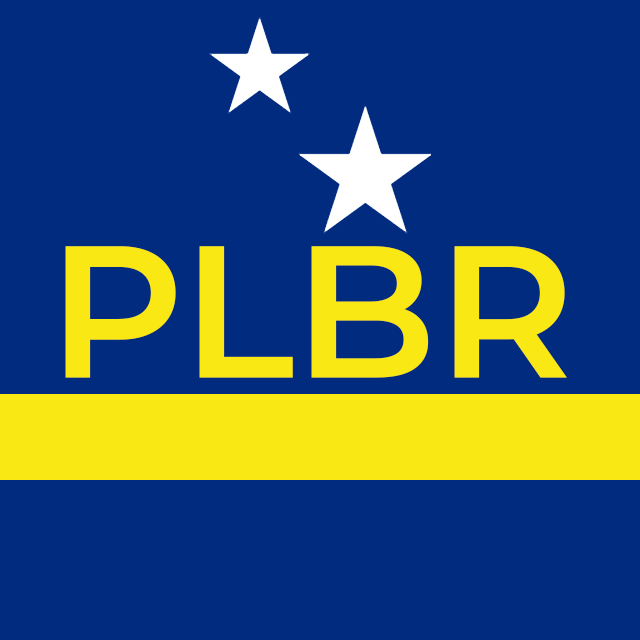
<style>
.page{position:relative;width:640px;height:640px;background:#002b7f}
.page>*{position:absolute;margin:0}
.t1{font:187.5px "MontserratRoman-SemiBold";color:#f9e814}
</style>
<div class="page">
<p class="t1" style="left:65px;top:246px;width:502px;height:132px">PLBR</p>
</div>
